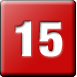
<style>
.page{position:relative;width:77px;height:77px}
.page>*{position:absolute;margin:0}
.t1{font:48.9px "HelveticaNeue-CondensedBlack";color:#ffffff}
</style>
<div class="page">
<p class="t1" style="left:15px;top:21px;width:48px;height:36px">15</p>
</div>
